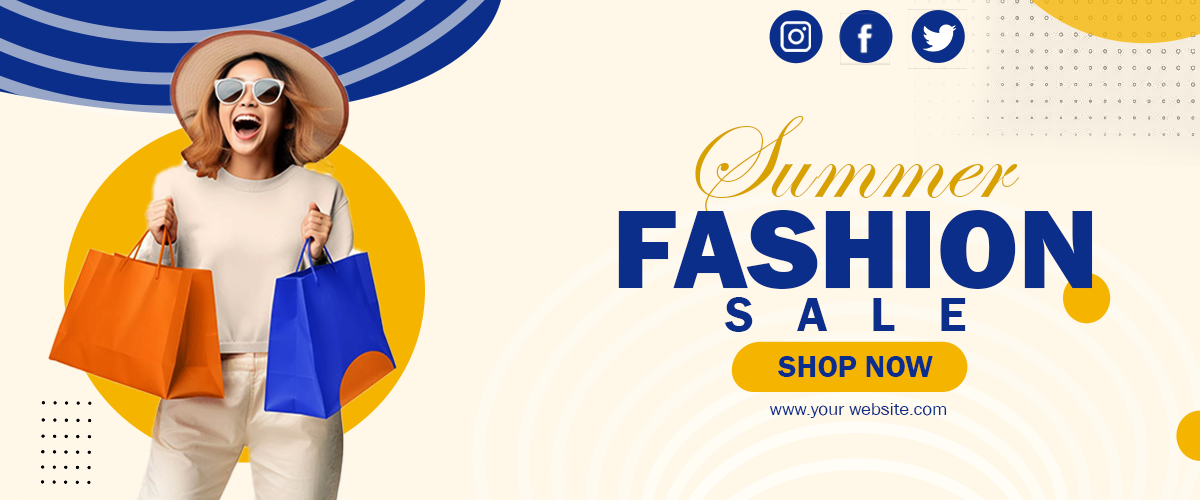
<style>
.page{position:relative;width:1200px;height:500px;background:#fff7e8}
.page>*{position:absolute;margin:0}
.t1{font:122.4px "EdwardianScriptITC";color:#d7a100}
.t2{font:114.9px "FranklinGothic-Heavy";color:#0a2e8a}
.t3{font:48.7px "FranklinGothic-Demi";letter-spacing:0.86em;color:#0a2e8a}
.t4{font:31.1px "FranklinGothic-Demi";color:#0a2e8a}
.t5{font:18.3px "FranklinGothic-Book";color:#0a2e8a}
</style>
<div class="page">
<p class="t1" style="left:695px;top:116px;width:325px;height:100px">Summer</p>
<p class="t2" style="left:618px;top:210px;width:475px;height:79px">FASHION</p>
<p class="t3" style="left:724px;top:297px;width:242px;height:35px">SALE</p>
<p class="t4" style="left:778px;top:356px;width:155px;height:21px">SHOP NOW</p>
<p class="t5" style="left:770px;top:403px;width:177px;height:15px">www.your website.com</p>
</div>
